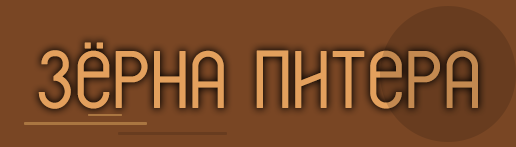
<style>
.page{position:relative;width:516px;height:147px;background:#794624}
.page>*{position:absolute;margin:0}
.t1{font:80px "FranksRus";color:#e3a05d;text-transform:uppercase;font-weight:bold}
</style>
<div class="page">
<p class="t1" style="left:38px;top:42px;width:440px;height:67px">Зёрна питера</p>
</div>
